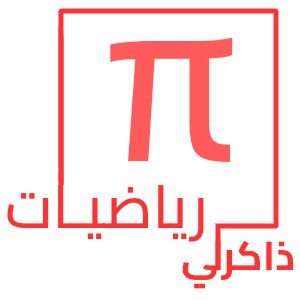
<style>
.page{position:relative;width:300px;height:300px;background:#ffffff}
.page>*{position:absolute;margin:0}
.t1{font:240px "Cairo-Medium";color:#ff5b5b}
.t2{font:60px "Cairo-Medium";color:#ff3333}
.t3{font:40px "Cairo-Bold";color:#ff3333}
</style>
<div class="page">
<p class="t1" style="left:110px;top:37px;width:123px;height:125px">π</p>
<p class="t2" style="left:7px;top:185px;width:197px;height:57px">رياضيـات</p>
<p class="t3" style="left:182px;top:240px;width:112px;height:49px">ذاكرلي</p>
</div>
